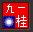
<style>
.page{position:relative;width:33px;height:32px;background:#f20000}
.page>*{position:absolute;margin:0}
.t1{font:10.4px "SimSun";color:#ffffff}
.t2{font:11.7px "SimSun";color:#ffffff}
</style>
<div class="page">
<p class="t1" style="left:6px;top:4px;width:19px;height:9px">九一</p>
<p class="t2" style="left:16px;top:15px;width:11px;height:12px">桂</p>
</div>
